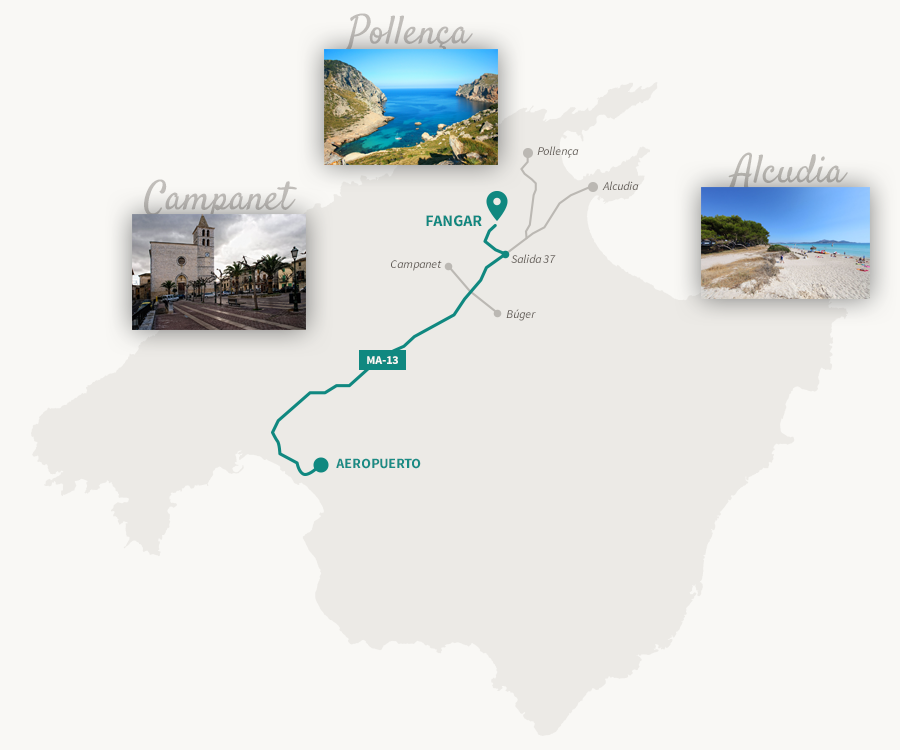
<style>
.page{position:relative;width:900px;height:750px;background:#f9f8f5}
.page>*{position:absolute;margin:0}
.t1{font:40px "Satisfy";color:#c1beba}
.t2{font:12px "SourceSansPro-It";color:#5d5751}
.t3{font:40px "Satisfy";color:#bfbcb7}
.t4{font:16px "SourceSansPro-Bold";color:#108880;text-transform:uppercase}
.t5{font:12px "SourceSansPro-Bold";color:#f9f8f5}
.t6{font:14px "SourceSansPro-Bold";color:#1a8c85;text-transform:uppercase}
</style>
<div class="page">
<p class="t1" style="left:346px;top:13px;width:127px;height:40px">Pollença</p>
<p class="t2" style="left:537px;top:146px;width:42px;height:12px">Pollença</p>
<p class="t3" style="left:727px;top:152px;width:121px;height:40px">Alcudia</p>
<p class="t1" style="left:144px;top:179px;width:153px;height:47px">Campanet</p>
<p class="t2" style="left:602px;top:181px;width:37px;height:9px">Alcudia</p>
<p class="t4" style="left:426px;top:215px;width:56px;height:12px">Fangar</p>
<p class="t2" style="left:511px;top:254px;width:45px;height:9px">Salida 37</p>
<p class="t2" style="left:391px;top:260px;width:51px;height:11px">Campanet</p>
<p class="t2" style="left:506px;top:309px;width:30px;height:12px">Búger</p>
<p class="t5" style="left:367px;top:356px;width:31px;height:8px">MA-13</p>
<p class="t6" style="left:336px;top:458px;width:85px;height:11px">aeropuerto</p>
</div>
